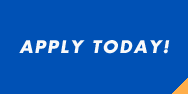
<style>
.page{position:relative;width:188px;height:94px;background:#0051b5}
.page>*{position:absolute;margin:0}
.t1{font:17px "FuturaStd-BoldOblique";letter-spacing:0.1em;color:#f9f9f9}
</style>
<div class="page">
<p class="t1" style="left:19px;top:40px;width:151px;height:14px">APPLY TODAY!</p>
</div>
